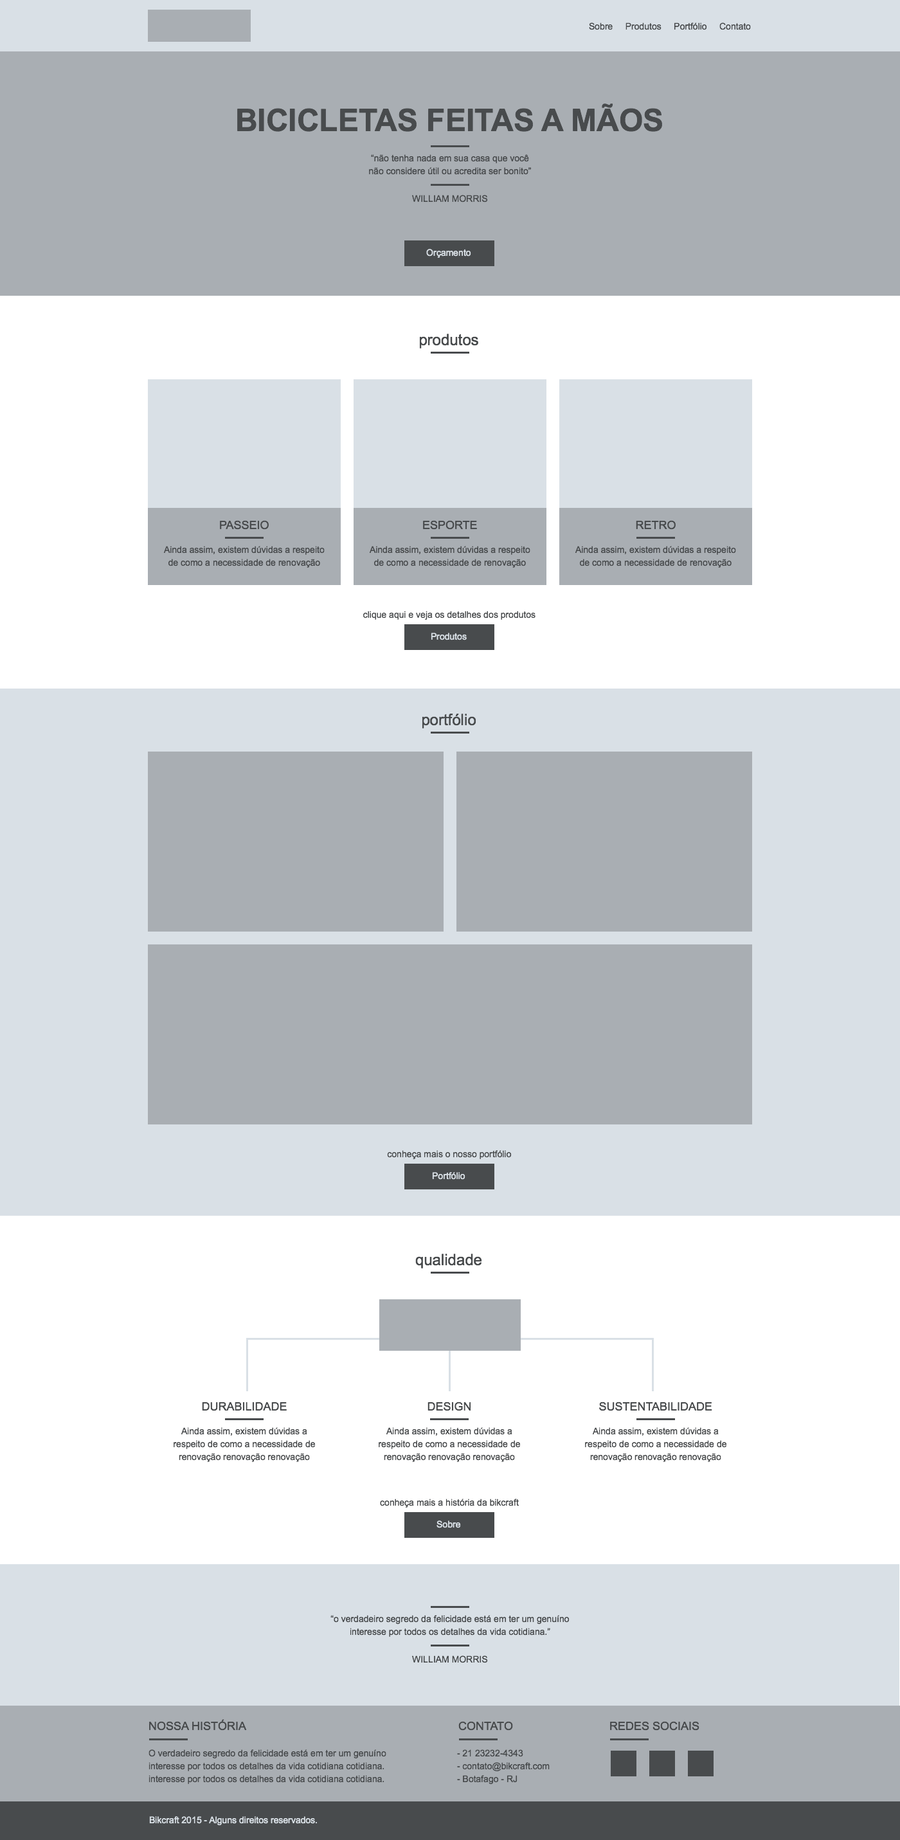
<style>
.page{position:relative;width:900px;height:1840px;background:#ffffff}
.page>*{position:absolute;margin:0}
.t1{font:9px "ArialMT";color:#484b4d}
.t2{font:30.9px "Arial-BoldMT";color:#484b4d;text-transform:uppercase}
.t3{font:9px/12.9px "ArialMT";color:#484b4d}
.t4{font:9px "ArialMT";color:#d9e0e6}
.t5{font:15.4px "ArialMT";color:#484b4d}
.t6{font:11.6px "ArialMT";color:#484b4d}
.t7{font:11.6px "ArialMT";color:#484b4d;text-transform:uppercase}
</style>
<div class="page">
<p class="t1" style="left:589px;top:22px;width:162px;height:8px">Sobre     Produtos     Portfólio     Contato</p>
<p class="t2" style="left:237px;top:104px;width:425px;height:28px">Bicicletas Feitas a Mãos</p>
<p class="t3" style="left:369px;top:154px;width:162px;height:21px;text-align:center">“não tenha nada em sua casa que você<br>não considere útil ou acredita ser bonito”</p>
<p class="t1" style="left:412px;top:195px;width:76px;height:8px">WILLIAM MORRIS</p>
<p class="t4" style="left:426px;top:249px;width:45px;height:9px">Orçamento</p>
<p class="t5" style="left:419px;top:334px;width:59px;height:14px">produtos</p>
<p class="t6" style="left:220px;top:520px;width:49px;height:10px">PASSEIO</p>
<p class="t6" style="left:423px;top:520px;width:54px;height:10px">ESPORTE</p>
<p class="t6" style="left:636px;top:520px;width:40px;height:10px">RETRO</p>
<p class="t3" style="left:163px;top:546px;width:162px;height:22px;text-align:center">Ainda assim, existem dúvidas a respeito de como a necessidade de renovação</p>
<p class="t3" style="left:369px;top:546px;width:161px;height:22px;text-align:center">Ainda assim, existem dúvidas a respeito de como a necessidade de renovação</p>
<p class="t3" style="left:575px;top:546px;width:161px;height:22px;text-align:center">Ainda assim, existem dúvidas a respeito de como a necessidade de renovação</p>
<p class="t1" style="left:363px;top:611px;width:173px;height:9px">clique aqui e veja os detalhes dos produtos</p>
<p class="t4" style="left:431px;top:633px;width:36px;height:7px">Produtos</p>
<p class="t5" style="left:422px;top:714px;width:54px;height:14px">portfólio</p>
<p class="t1" style="left:387px;top:1150px;width:125px;height:9px">conheça mais o nosso portfólio</p>
<p class="t4" style="left:432px;top:1172px;width:33px;height:8px">Portfólio</p>
<p class="t5" style="left:415px;top:1254px;width:67px;height:14px">qualidade</p>
<p class="t6" style="left:202px;top:1402px;width:85px;height:9px">DURABILIDADE</p>
<p class="t6" style="left:428px;top:1401px;width:43px;height:10px">DESIGN</p>
<p class="t6" style="left:599px;top:1401px;width:113px;height:10px">SUSTENTABILIDADE</p>
<p class="t3" style="left:174px;top:1427px;width:142px;height:35px;text-align:center">Ainda assim, existem dúvidas a respeito de como a necessidade de renovação renovação renovação</p>
<p class="t3" style="left:379px;top:1427px;width:142px;height:35px;text-align:center">Ainda assim, existem dúvidas a respeito de como a necessidade de renovação renovação renovação</p>
<p class="t3" style="left:585px;top:1427px;width:142px;height:35px;text-align:center">Ainda assim, existem dúvidas a respeito de como a necessidade de renovação renovação renovação</p>
<p class="t1" style="left:380px;top:1498px;width:139px;height:10px">conheça mais a história da bikcraft</p>
<p class="t4" style="left:437px;top:1520px;width:24px;height:8px">Sobre</p>
<p class="t3" style="left:330px;top:1615px;width:240px;height:22px;text-align:center">“o verdadeiro segredo da felicidade está em ter um genuíno<br>interesse por todos os detalhes da vida cotidiana.”</p>
<p class="t1" style="left:412px;top:1655px;width:76px;height:8px">WILLIAM MORRIS</p>
<p class="t7" style="left:149px;top:1719px;width:98px;height:12px">Nossa História</p>
<p class="t7" style="left:458px;top:1721px;width:55px;height:10px">Contato</p>
<p class="t7" style="left:610px;top:1721px;width:89px;height:10px">Redes sociais</p>
<p class="t3" style="left:148px;top:1749px;width:238px;height:35px">O verdadeiro segredo da felicidade está em ter um genuíno interesse por todos os detalhes da vida cotidiana cotidiana.<br>interesse por todos os detalhes da vida cotidiana cotidiana.</p>
<p class="t3" style="left:457px;top:1749px;width:93px;height:35px">- 21 23232-4343<br>- contato@bikcraft.com<br>- Botafago - RJ</p>
<p class="t4" style="left:149px;top:1816px;width:168px;height:9px">Bikcraft 2015 - Alguns direitos reservados.</p>
</div>
